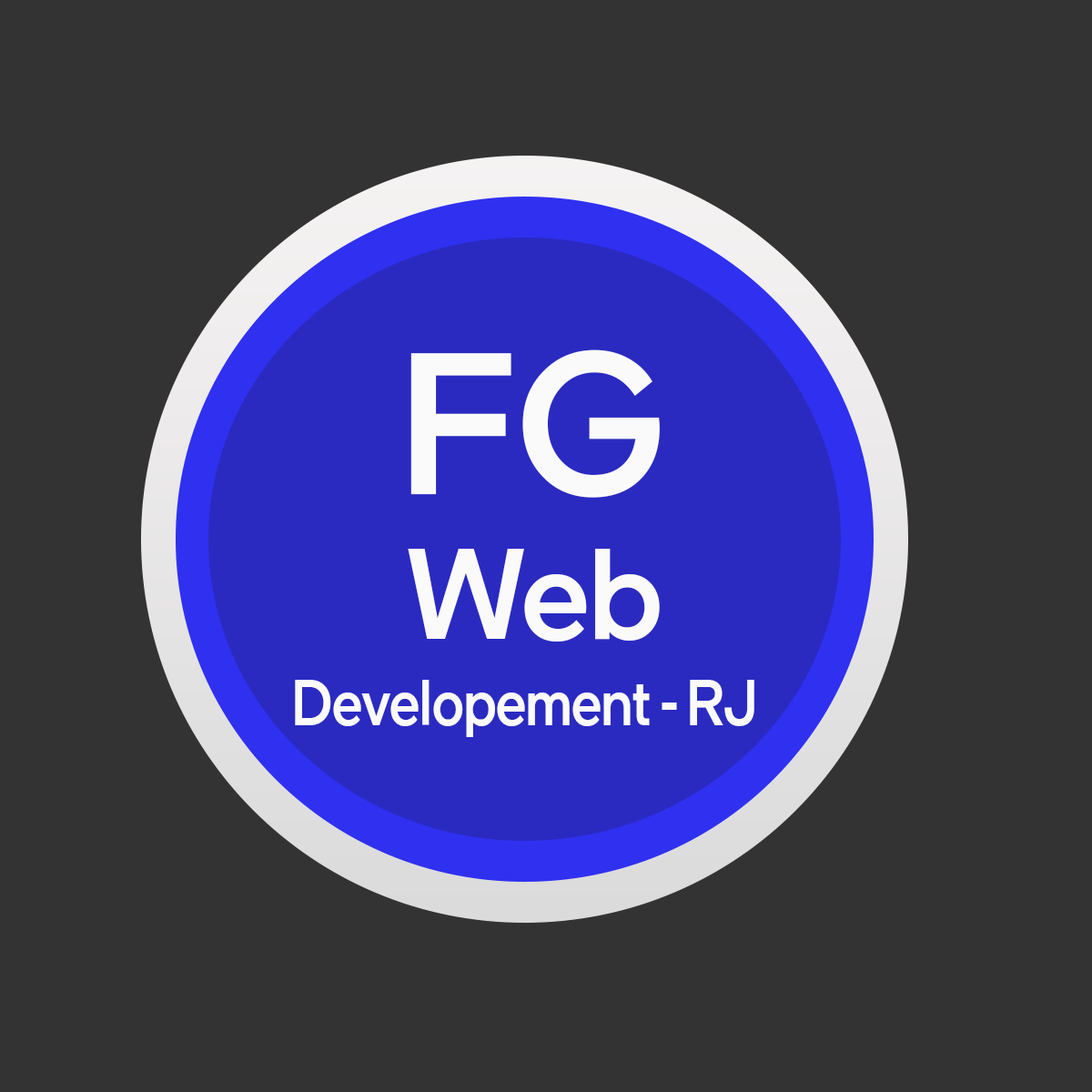
<style>
.page{position:relative;width:1092px;height:1092px;background:#333333}
.page>*{position:absolute;margin:0}
.t1{font:201.2px "IntelOneDisplay-Medium";color:#fbfafa;scale:0.96 1}
.t2{font:128.7px "IntelOneDisplay-Medium";color:#fbfafa;scale:0.95 1}
.t3{font:63.4px "IntelOneDisplay-Medium";color:#fbfafa;scale:0.86 1}
</style>
<div class="page">
<p class="t1" style="left:410px;top:349px;width:250px;height:149px">FG</p>
<p class="t2" style="left:408px;top:549px;width:252px;height:93px">Web</p>
<p class="t3" style="left:295px;top:680px;width:459px;height:57px">Developement - RJ</p>
</div>
